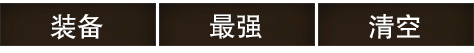
<style>
.page{position:relative;width:474px;height:53px;background:#2b1f15}
.page>*{position:absolute;margin:0}
.t1{font:27px "FZHTJW--GB1-0";letter-spacing:-0.025em;color:#ffffff}
</style>
<div class="page">
<p class="t1" style="left:50px;top:14px;width:53px;height:26px">装备</p>
<p class="t1" style="left:210px;top:14px;width:52px;height:25px">最强</p>
<p class="t1" style="left:369px;top:14px;width:51px;height:25px">清空</p>
</div>
